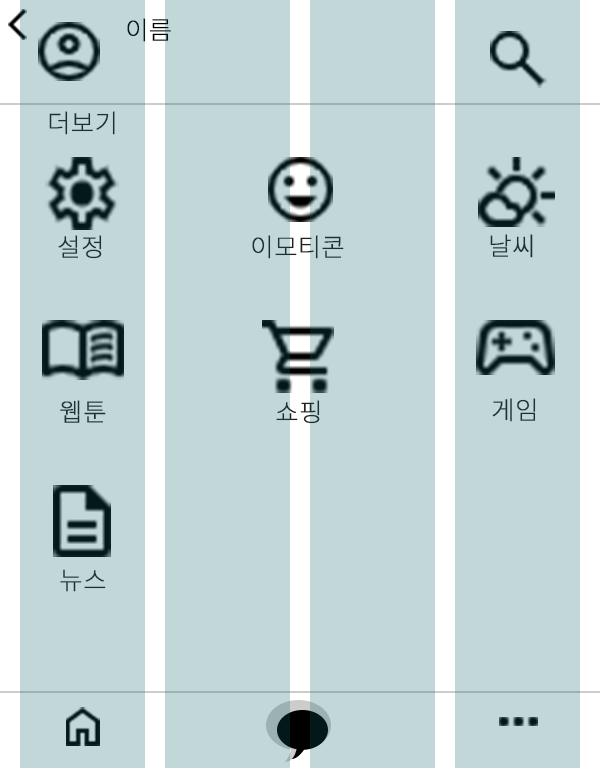
<style>
.page{position:relative;width:600px;height:768px;background:#c1d7d8}
.page>*{position:absolute;margin:0}
.t1{font:25px "NotoSansKR-Thin";font-weight:bold}
.t2{font:25px "NotoSansKR-Thin";color:#222222;font-weight:bold}
</style>
<div class="page">
<p class="t1" style="left:127px;top:18px;width:44px;height:24px">이름</p>
<p class="t2" style="left:49px;top:111px;width:66px;height:24px">더보기</p>
<p class="t2" style="left:58px;top:235px;width:44px;height:24px">설정</p>
<p class="t2" style="left:252px;top:235px;width:92px;height:24px">이모티콘</p>
<p class="t2" style="left:490px;top:234px;width:43px;height:24px">날씨</p>
<p class="t2" style="left:60px;top:400px;width:46px;height:23px">웹툰</p>
<p class="t2" style="left:276px;top:400px;width:44px;height:24px">쇼핑</p>
<p class="t2" style="left:492px;top:398px;width:44px;height:24px">게임</p>
<p class="t2" style="left:60px;top:569px;width:46px;height:23px">뉴스</p>
</div>
